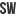
<style>
.page{position:relative;width:16px;height:16px;background:#ffffff}
.page>*{position:absolute;margin:0}
.t1{font:17.3px "BebasNeue";color:#333230}
</style>
<div class="page">
<p class="t1" style="left:0px;top:2px;width:16px;height:12px">Sw</p>
</div>
